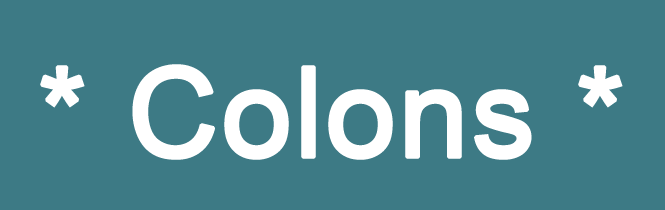
<style>
.page{position:relative;width:665px;height:210px;background:#3d7a85}
.page>*{position:absolute;margin:0}
.t1{font:125px "ArialMT";color:#ffffff;font-weight:bold}
</style>
<div class="page">
<p class="t1" style="left:40px;top:64px;width:583px;height:96px">* Colons *</p>
</div>
